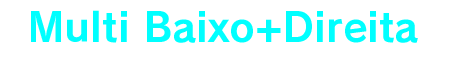
<style>
.page{position:relative;width:450px;height:60px;background:#ffffff}
.page>*{position:absolute;margin:0}
.t1{font:40px "RodinPro-B";color:#00ffff}
</style>
<div class="page">
<p class="t1" style="left:31px;top:10px;width:387px;height:33px">Multi Baixo+Direita</p>
</div>
